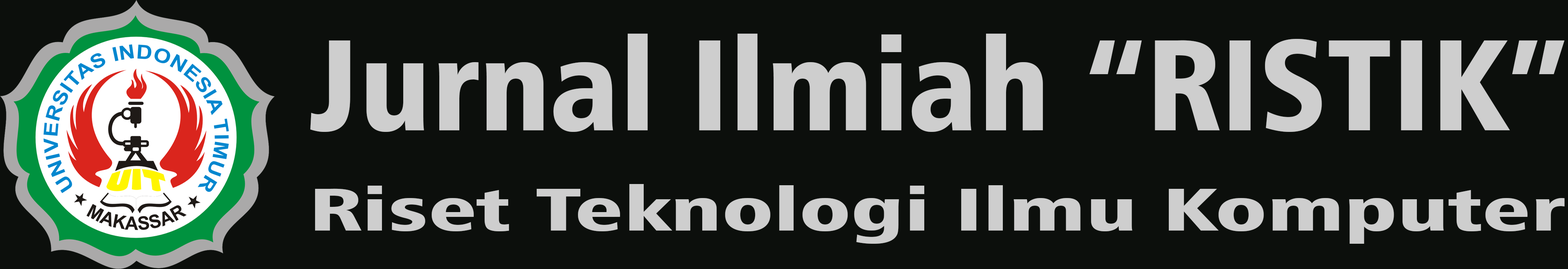
<style>
.page{position:relative;width:1568px;height:269px;background:#0c0f0c}
.page>*{position:absolute;margin:0}
.t1{font:129.2px "Humanist777BT-BlackCondensedB";color:#cecece}
.t2{font:60.3px "Humanist777BT-BlackCondensedB";color:#cecece;scale:1.56 1}
</style>
<div class="page">
<p class="t1" style="left:310px;top:33px;width:1255px;height:99px">Jurnal Ilmiah “RISTIK”</p>
<p class="t2" style="left:315px;top:184px;width:1250px;height:60px">Riset Teknologi Ilmu Komputer</p>
</div>
